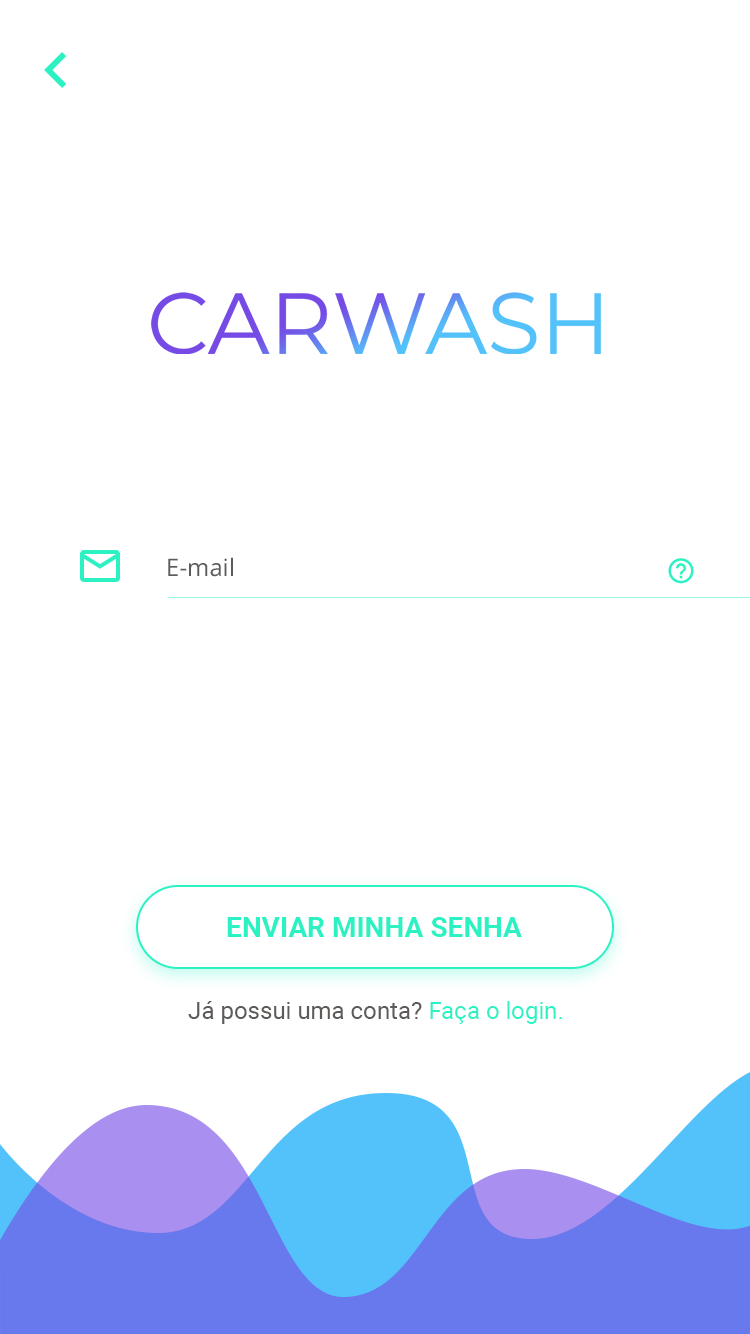
<style>
.page{position:relative;width:750px;height:1334px;background:#ffffff}
.page>*{position:absolute;margin:0}
.t1{font:24px "OpenSans";color:#5d5a58}
.t2{font:28px "Roboto-Bold";color:#2cf2c3;text-transform:uppercase}
.t3{font:24px "Roboto-Regular";color:#5d5a58}
.t4{font:24px "Roboto-Regular";color:#2cf2c3}
</style>
<div class="page">
<p class="t1" style="left:168px;top:557px;width:65px;height:20px">E-mail</p>
<p class="t2" style="left:227px;top:917px;width:295px;height:20px">enviar minha senha</p>
<p class="t3" style="left:188px;top:1001px;width:374px;height:23px">Já possui uma conta? <span class="t4">Faça o login.</span></p>
</div>
